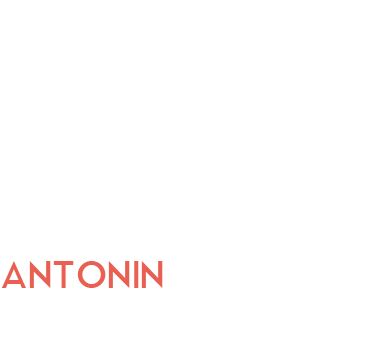
<style>
.page{position:relative;width:374px;height:346px;background:#ffffff}
.page>*{position:absolute;margin:0}
.t1{font:37.4px "ModernGrotesk";color:#ffffff}
.t2{font:37.4px "ModernGrotesk";color:#ea5f51}
</style>
<div class="page">
<p class="t1" style="left:1px;top:260px;width:372px;height:28px"><span class="t2">ANTONIN</span> RESSAULT</p>
</div>
